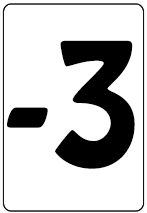
<style>
.page{position:relative;width:147px;height:213px;background:#ffffff}
.page>*{position:absolute;margin:0}
.t1{font:154.6px "HoboStd";color:#000000;scale:1.05 1}
</style>
<div class="page">
<p class="t1" style="left:6px;top:40px;width:129px;height:129px">-3</p>
</div>
